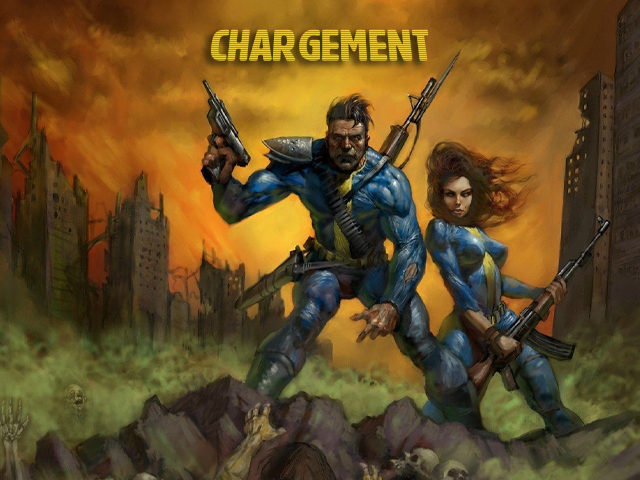
<style>
.page{position:relative;width:640px;height:480px}
.page>*{position:absolute;margin:0}
.t1{font:44.1px "Gothic821CondensedBT-Regular";scale:1.13 1}
</style>
<div class="page">
<p class="t1" style="left:211px;top:29px;width:218px;height:32px">CHARGEMENT</p>
</div>
